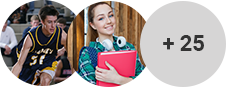
<style>
.page{position:relative;width:226px;height:87px;background:#d6d5d5}
.page>*{position:absolute;margin:0}
.t1{font:21.6px "Roboto-Bold";color:#333333}
</style>
<div class="page">
<p class="t1" style="left:163px;top:35px;width:41px;height:16px">+ 25</p>
</div>
